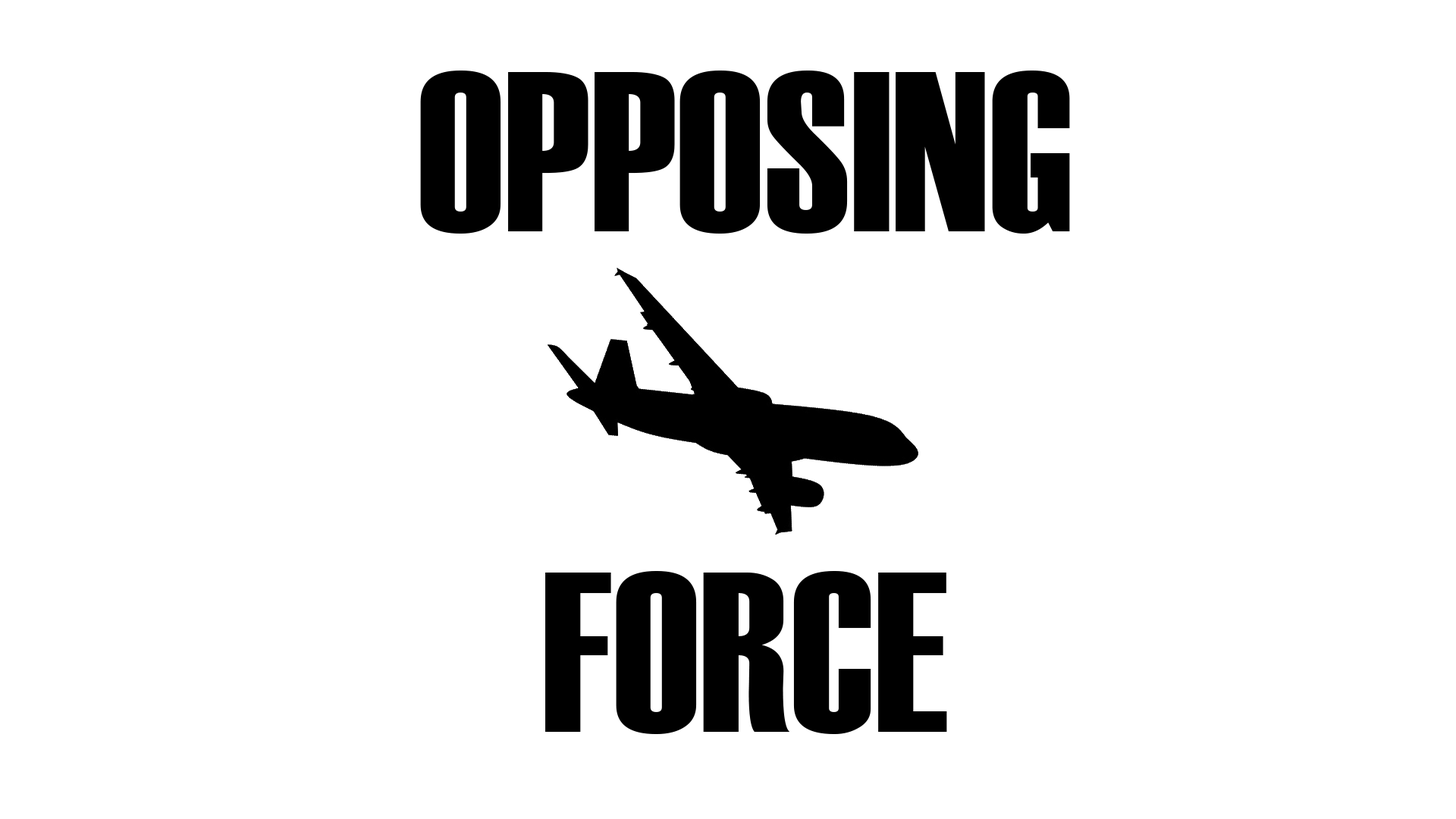
<style>
.page{position:relative;width:1456px;height:819px;background:#ffffff}
.page>*{position:absolute;margin:0}
.t1{font:227.5px "Haettenschweiler";color:#000000}
</style>
<div class="page">
<p class="t1" style="left:420px;top:71px;width:650px;height:663px;text-align:center">OPPOSING <br><br>FORCE</p>
</div>
